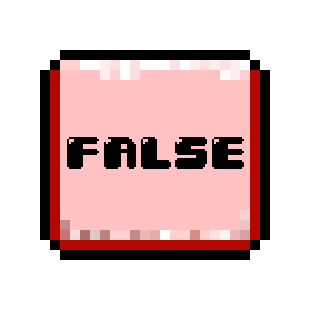
<style>
.page{position:relative;width:320px;height:320px;background:#ffffff}
.page>*{position:absolute;margin:0}
.t1{font:38.9px "04b30";color:#000000}
</style>
<div class="page">
<p class="t1" style="left:67px;top:137px;width:177px;height:32px">FALSE</p>
</div>
